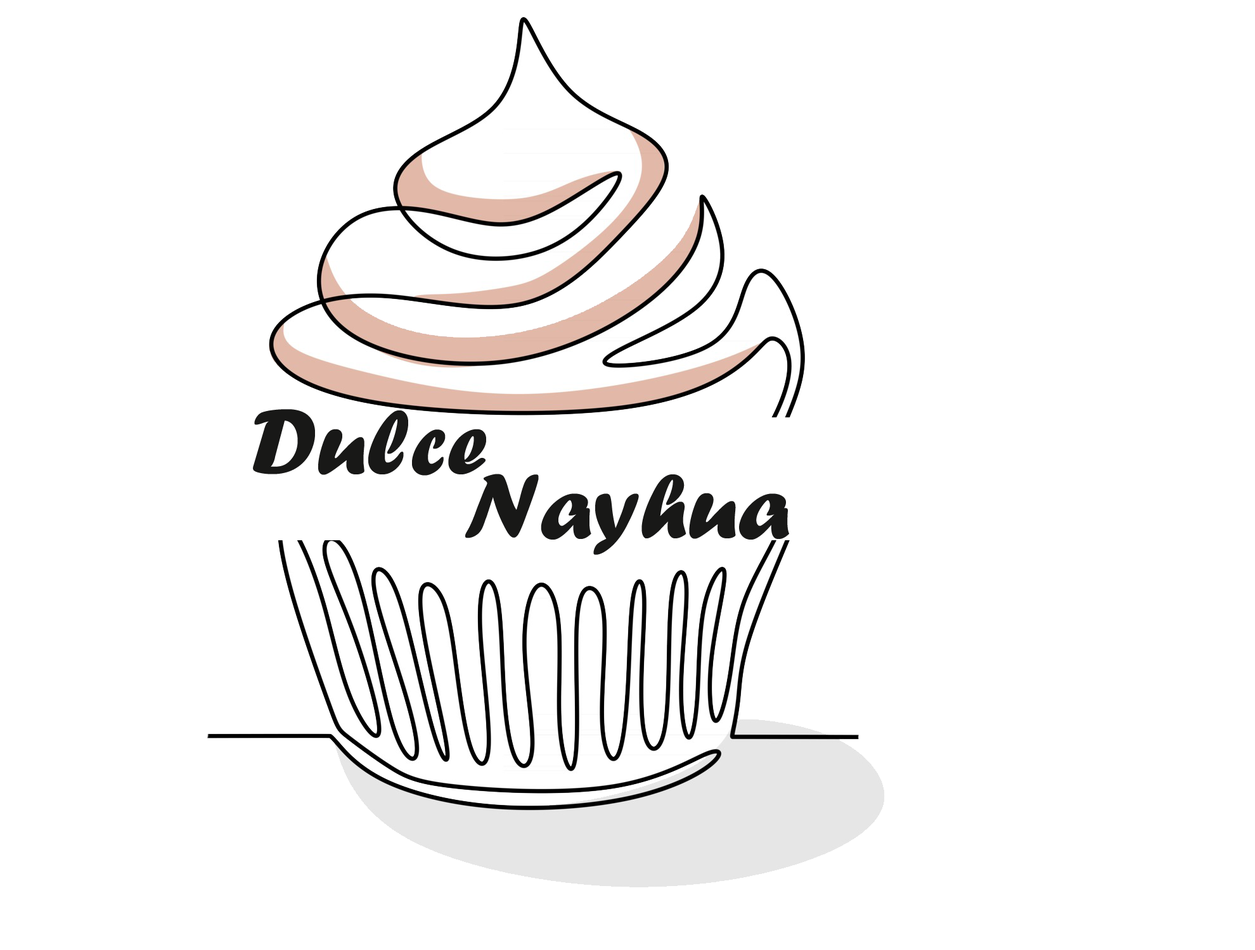
<style>
.page{position:relative;width:1255px;height:950px;background:#ffffff}
.page>*{position:absolute;margin:0}
.t1{font:95px "ForteMT";color:#181817}
</style>
<div class="page">
<p class="t1" style="left:253px;top:409px;width:233px;height:67px">Dulce</p>
<p class="t1" style="left:465px;top:474px;width:324px;height:81px">Nayhua</p>
</div>
